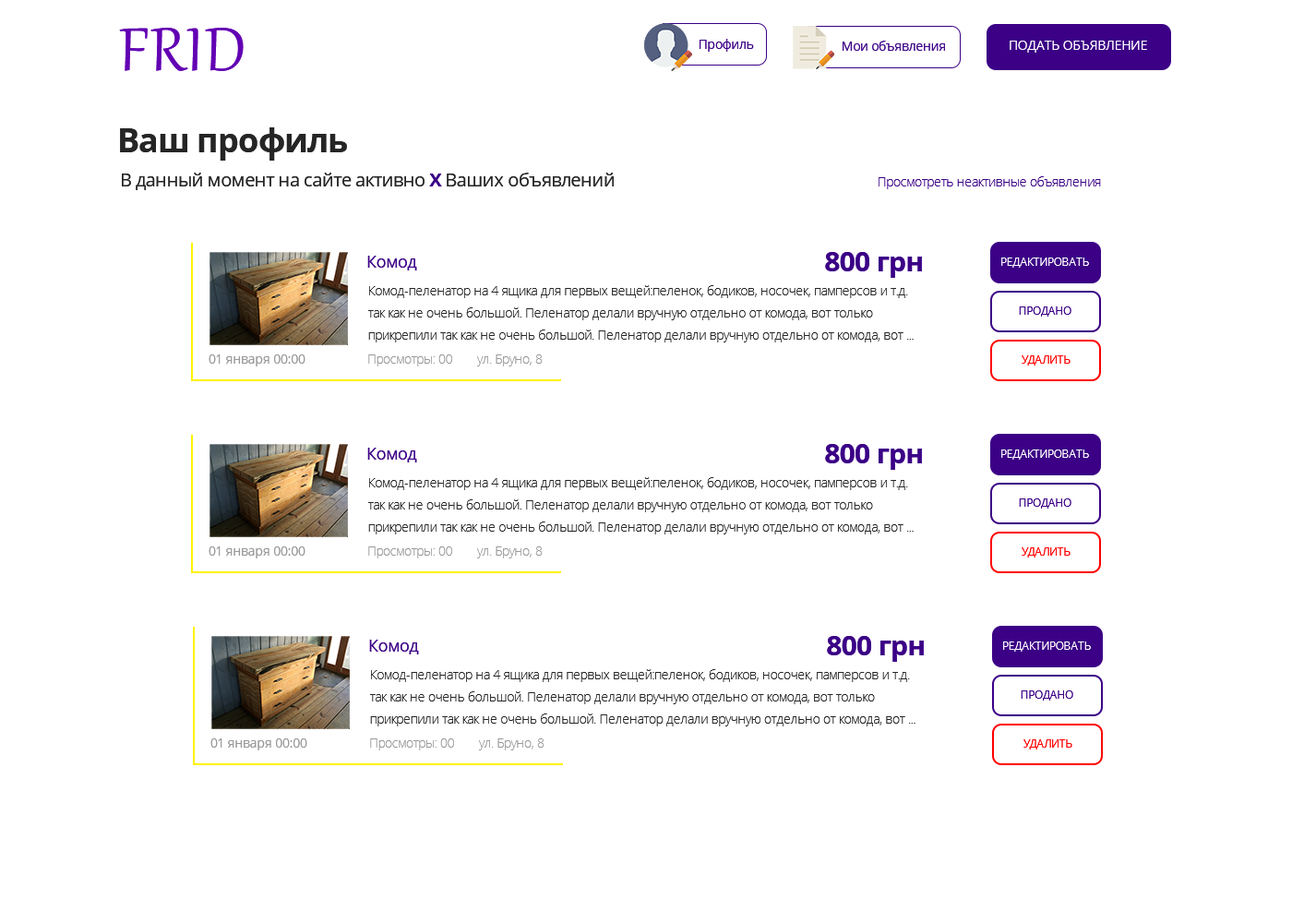
<style>
.page{position:relative;width:1292px;height:923px;background:#ffffff}
.page>*{position:absolute;margin:0}
.t1{font:75px "Gabriola";letter-spacing:0.025em;color:#6200b3}
.t2{font:12.9px "OpenSans";letter-spacing:-0.024em;color:#3b0086}
.t3{font:12.9px "OpenSans";letter-spacing:-0.024em;color:#ffffff}
.t4{font:33.2px "OpenSans-Bold";letter-spacing:-0.024em;color:#252525}
.t5{font:18.5px "OpenSans";letter-spacing:-0.024em;color:#252525}
.t6{font:18.5px "OpenSans-Bold";letter-spacing:-0.024em;color:#3b0086}
.t7{font:12.9px "OpenSans-Light";letter-spacing:-0.024em;color:#3b0086}
.t8{font:16.6px "OpenSans";letter-spacing:-0.024em;color:#3b0086}
.t9{font:27.7px "OpenSans-Bold";letter-spacing:-0.024em;color:#3b0086}
.t10{font:11.1px "OpenSans";letter-spacing:-0.024em;color:#ffffff}
.t11{font:12.9px/22.1px "OpenSans-Light";letter-spacing:-0.024em;color:#252525}
.t12{font:11.1px "OpenSans";letter-spacing:-0.024em;color:#3b0086}
.t13{font:12.9px "OpenSans";letter-spacing:-0.024em;color:#999999}
.t14{font:12.9px "OpenSans-Light";letter-spacing:-0.024em;color:#999999}
.t15{font:11.1px "OpenSans";letter-spacing:-0.024em;color:#ff0000}
</style>
<div class="page">
<p class="t1" style="left:119px;top:28px;width:125px;height:43px">FRID</p>
<p class="t2" style="left:700px;top:39px;width:54px;height:13px">Профиль</p>
<p class="t2" style="left:843px;top:41px;width:102px;height:10px">Мои объявления</p>
<p class="t3" style="left:1010px;top:41px;width:137px;height:12px">ПОДАТЬ ОБЪЯВЛЕНИЕ</p>
<p class="t4" style="left:120px;top:127px;width:227px;height:34px">Ваш профиль</p>
<p class="t5" style="left:122px;top:173px;width:492px;height:17px">В данный момент на сайте активно <span class="t6">Х</span> Ваших объявлений</p>
<p class="t7" style="left:879px;top:176px;width:222px;height:13px">Просмотреть неактивные объявления</p>
<p class="t8" style="left:367px;top:256px;width:50px;height:14px">Комод</p>
<p class="t9" style="left:825px;top:252px;width:97px;height:26px">800 грн</p>
<p class="t10" style="left:1001px;top:257px;width:88px;height:11px">РЕДАКТИРОВАТЬ</p>
<p class="t11" style="left:368px;top:285px;width:546px;height:57px">Комод-пеленатор на 4 ящика для первых вещей:пеленок, бодиков, носочек, памперсов и т.д.<br>так как не очень большой. Пеленатор делали вручную отдельно от комода, вот только<br>прикрепили так как не очень большой. Пеленатор делали вручную отдельно от комода, вот ...</p>
<p class="t12" style="left:1019px;top:306px;width:52px;height:11px">ПРОДАНО</p>
<p class="t13" style="left:209px;top:354px;width:96px;height:12px">01 января 00:00</p>
<p class="t14" style="left:368px;top:354px;width:84px;height:12px">Просмотры: 00</p>
<p class="t14" style="left:477px;top:354px;width:66px;height:12px">ул. Бруно, 8</p>
<p class="t15" style="left:1022px;top:355px;width:49px;height:10px">УДАЛИТЬ</p>
<p class="t8" style="left:367px;top:448px;width:50px;height:14px">Комод</p>
<p class="t9" style="left:825px;top:444px;width:97px;height:26px">800 грн</p>
<p class="t10" style="left:1001px;top:449px;width:88px;height:11px">РЕДАКТИРОВАТЬ</p>
<p class="t11" style="left:368px;top:477px;width:546px;height:57px">Комод-пеленатор на 4 ящика для первых вещей:пеленок, бодиков, носочек, памперсов и т.д.<br>так как не очень большой. Пеленатор делали вручную отдельно от комода, вот только<br>прикрепили так как не очень большой. Пеленатор делали вручную отдельно от комода, вот ...</p>
<p class="t12" style="left:1019px;top:498px;width:52px;height:11px">ПРОДАНО</p>
<p class="t13" style="left:209px;top:546px;width:96px;height:12px">01 января 00:00</p>
<p class="t14" style="left:368px;top:546px;width:84px;height:12px">Просмотры: 00</p>
<p class="t14" style="left:477px;top:546px;width:66px;height:12px">ул. Бруно, 8</p>
<p class="t15" style="left:1022px;top:547px;width:49px;height:10px">УДАЛИТЬ</p>
<p class="t8" style="left:369px;top:640px;width:50px;height:14px">Комод</p>
<p class="t9" style="left:827px;top:636px;width:97px;height:26px">800 грн</p>
<p class="t10" style="left:1003px;top:641px;width:88px;height:11px">РЕДАКТИРОВАТЬ</p>
<p class="t11" style="left:370px;top:669px;width:546px;height:57px">Комод-пеленатор на 4 ящика для первых вещей:пеленок, бодиков, носочек, памперсов и т.д.<br>так как не очень большой. Пеленатор делали вручную отдельно от комода, вот только<br>прикрепили так как не очень большой. Пеленатор делали вручную отдельно от комода, вот ...</p>
<p class="t12" style="left:1021px;top:690px;width:52px;height:10px">ПРОДАНО</p>
<p class="t13" style="left:210px;top:738px;width:97px;height:12px">01 января 00:00</p>
<p class="t14" style="left:370px;top:738px;width:84px;height:12px">Просмотры: 00</p>
<p class="t14" style="left:479px;top:738px;width:66px;height:12px">ул. Бруно, 8</p>
<p class="t15" style="left:1023px;top:739px;width:49px;height:10px">УДАЛИТЬ</p>
</div>
